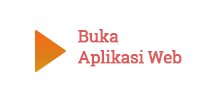
<style>
.page{position:relative;width:200px;height:95px;background:#ffffff}
.page>*{position:absolute;margin:0}
.t1{font:17.4px "RobotoSlab-Regular";letter-spacing:-0.05em;color:#de5b5b;font-weight:bold}
</style>
<div class="page">
<p class="t1" style="left:78px;top:29px;width:104px;height:38px">Buka<br>Aplikasi Web</p>
</div>
